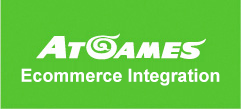
<style>
.page{position:relative;width:241px;height:109px;background:#56c431}
.page>*{position:absolute;margin:0}
.t1{font:18px "Arial-BoldMT";color:#ffffff}
</style>
<div class="page">
<p class="t1" style="left:21px;top:68px;width:199px;height:18px">Ecommerce Integration</p>
</div>
